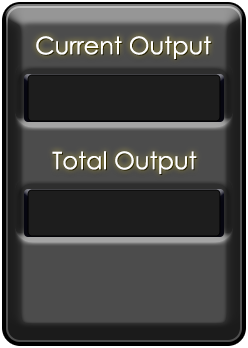
<style>
.page{position:relative;width:248px;height:348px;background:#4c4c4c}
.page>*{position:absolute;margin:0}
.t1{font:24px "CenturyGothic";color:#ffffff}
.t2{font:24px "CenturyGothic"}
</style>
<div class="page">
<p class="t1" style="left:36px;top:36px;width:175px;height:23px">Current Output</p>
<p class="t2" style="left:37px;top:37px;width:175px;height:23px">Current Output</p>
<p class="t1" style="left:52px;top:151px;width:145px;height:23px">Total Output</p>
<p class="t2" style="left:53px;top:152px;width:145px;height:23px">Total Output</p>
</div>
